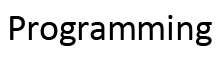
<style>
.page{position:relative;width:221px;height:60px;background:#ffffff}
.page>*{position:absolute;margin:0}
.t1{font:37.5px "Calibri";color:#000000}
</style>
<div class="page">
<p class="t1" style="left:10px;top:15px;width:202px;height:31px">Programming</p>
</div>
